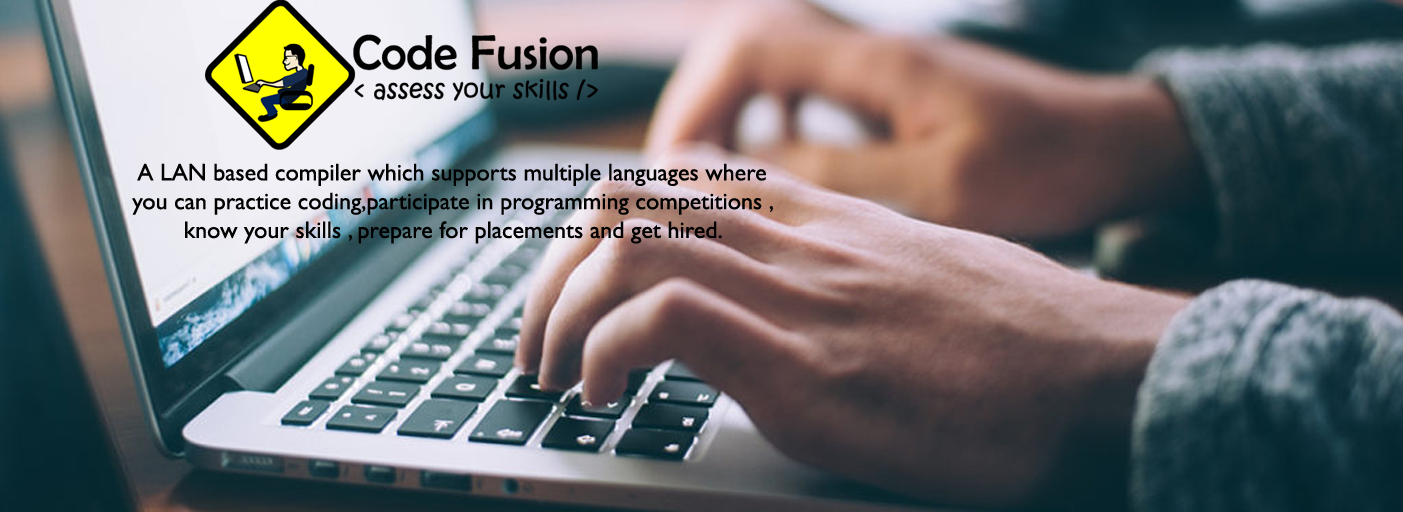
<style>
.page{position:relative;width:1403px;height:512px}
.page>*{position:absolute;margin:0}
.t1{font:24px "GillSansMT";color:#010101}
</style>
<div class="page">
<p class="t1" style="left:132px;top:163px;width:641px;height:81px;text-align:center">A LAN based compiler which supports multiple languages where you can practice coding,participate in programming competitions , know your skills , prepare for placements and get hired.</p>
</div>
